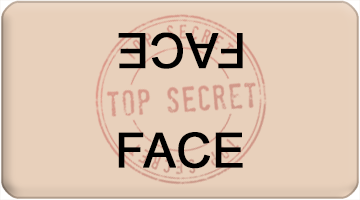
<style>
.page{position:relative;width:360px;height:200px;background:#e8d0bb}
.page>*{position:absolute;margin:0}
.t1{font:48px "ArialMT";color:#000000;font-weight:bold}
</style>
<div class="page">
<p class="t1" style="left:118px;top:32px;width:125px;height:37px;rotate:180deg">FACE</p>
<p class="t1" style="left:118px;top:132px;width:125px;height:37px">FACE</p>
</div>
